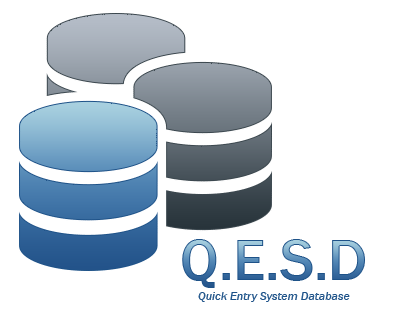
<style>
.page{position:relative;width:394px;height:315px;background:#ffffff}
.page>*{position:absolute;margin:0}
.t1{font:60px "FranklinGothic-Medium"}
.t2{font:12px "FranklinGothic-MediumItalic";color:#1e5288}
</style>
<div class="page">
<p class="t1" style="left:182px;top:239px;width:183px;height:49px">Q.E.S.D</p>
<p class="t2" style="left:198px;top:292px;width:152px;height:10px">Quick Entry System Database</p>
</div>
